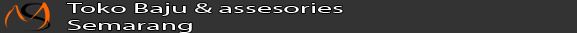
<style>
.page{position:relative;width:577px;height:33px;background:#333333}
.page>*{position:absolute;margin:0}
.t1{font:13.6px "MyriadPro-Regular";color:#ffffff;scale:2.21 1}
</style>
<div class="page">
<p class="t1" style="left:67px;top:3px;width:276px;height:30px">Toko Baju &amp; assesories <br>Semarang</p>
</div>
